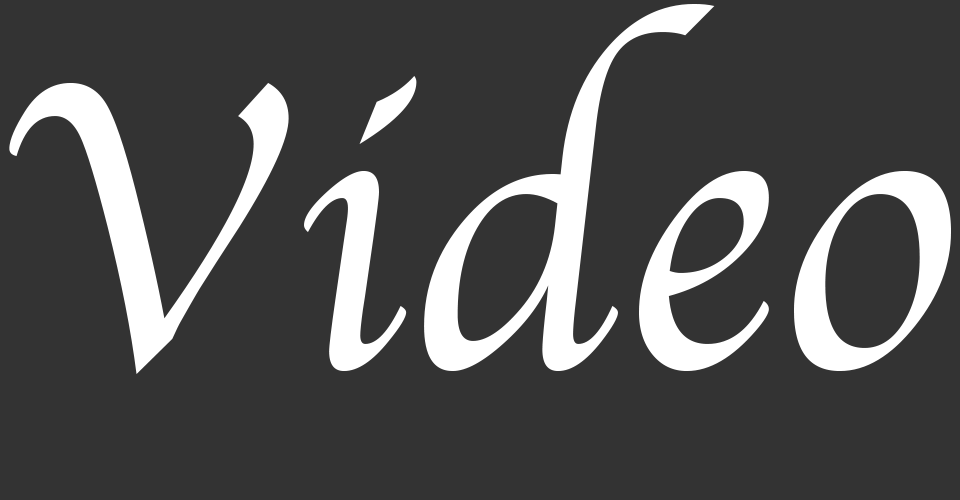
<style>
.page{position:relative;width:960px;height:500px;background:#333333}
.page>*{position:absolute;margin:0}
.t1{font:418px "Apple-Chancery";color:#ffffff}
</style>
<div class="page">
<p class="t1" style="left:9px;top:4px;width:942px;height:370px">Video</p>
</div>
